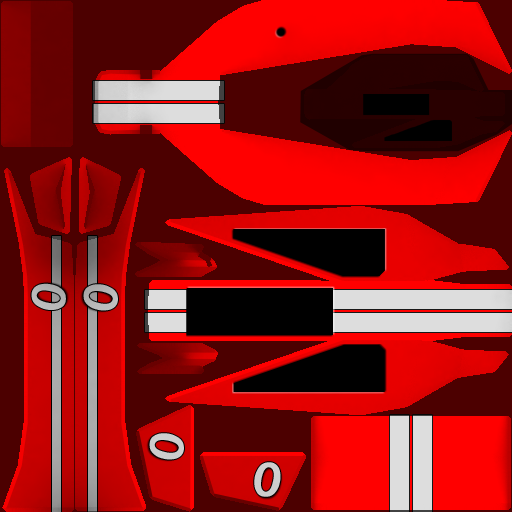
<style>
.page{position:relative;width:512px;height:512px;background:#4c0000}
.page>*{position:absolute;margin:0}
.t1{font:47.7px "FranklinGothic-MediumItalic";color:#b5b5b5;font-weight:bold}
.t2{font:47.7px "FranklinGothic-MediumItalic";color:#b6b6b7;font-weight:bold}
.t3{font:47.7px "FranklinGothic-MediumItalic";color:#cdcdcd;font-weight:bold}
</style>
<div class="page">
<p class="t1" style="left:31px;top:283px;width:35px;height:27px;rotate:-90deg">0</p>
<p class="t2" style="left:83px;top:284px;width:35px;height:27px;rotate:90deg">0</p>
<p class="t3" style="left:149px;top:433px;width:35px;height:27px;rotate:90deg">0</p>
<p class="t3" style="left:254px;top:462px;width:27px;height:35px">0</p>
</div>
